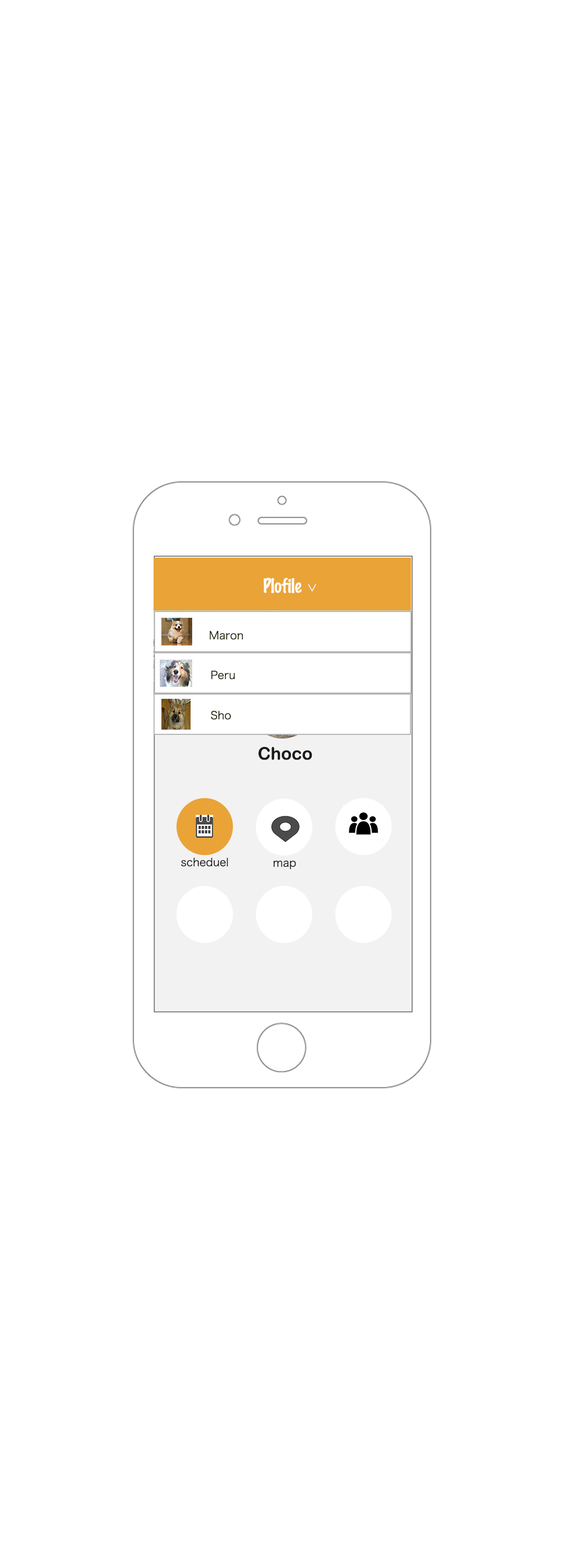
<style>
.page{position:relative;width:564px;height:1568px;background:#ffffff}
.page>*{position:absolute;margin:0}
.t1{font:17.4px "MarkerFelt-Thin";color:#ffffff}
.t2{font:10.9px "HiraKakuProN-W3";color:#f8f4f4}
.t3{font:10.9px "HiraKakuProN-W3";color:#212108}
.t4{font:17.4px "ArialRoundedMTBold";color:#1d1a1a}
.t5{font:10.9px "HiraKakuProN-W3";color:#1d1a1a}
</style>
<div class="page">
<p class="t1" style="left:263px;top:578px;width:39px;height:15px">Plofile</p>
<p class="t2" style="left:308px;top:584px;width:9px;height:8px;rotate:89deg">＞</p>
<p class="t3" style="left:210px;top:631px;width:34px;height:9px">Maron</p>
<p class="t3" style="left:211px;top:671px;width:24px;height:8px">Peru</p>
<p class="t3" style="left:211px;top:711px;width:20px;height:9px">Sho</p>
<p class="t4" style="left:259px;top:747px;width:54px;height:13px">Choco</p>
<p class="t5" style="left:181px;top:858px;width:47px;height:9px">scheduel</p>
<p class="t5" style="left:273px;top:860px;width:23px;height:9px">map</p>
</div>
